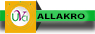
<style>
.page{position:relative;width:95px;height:34px;background:#ffffff}
.page>*{position:absolute;margin:0}
.t1{font:7.9px "MyriadPro-Bold";color:#000000;scale:1.44 1}
</style>
<div class="page">
<p class="t1" style="left:37px;top:13px;width:48px;height:6px">ALLAKRO</p>
</div>
